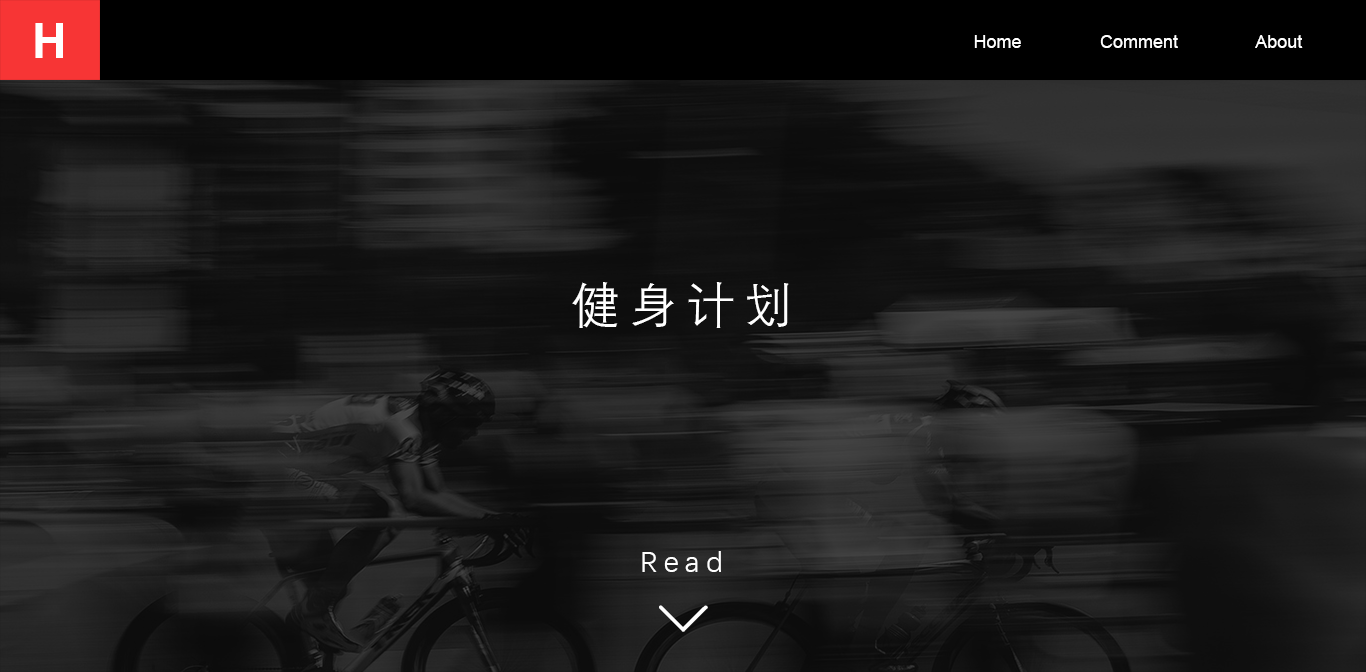
<style>
.page{position:relative;width:1366px;height:672px}
.page>*{position:absolute;margin:0}
.t1{font:48px "Arial-BoldMT";color:#ffffff}
.t2{font:18px "ArialMT";color:#ffffff}
.t3{font:48px "DengXian-Regular";letter-spacing:0.2em;color:#ffffff}
.t4{font:30px "DengXian-Regular";letter-spacing:0.2em;color:#ffffff}
</style>
<div class="page">
<p class="t1" style="left:35px;top:23px;width:28px;height:35px">H</p>
<p class="t2" style="left:974px;top:35px;width:47px;height:13px">Home</p>
<p class="t2" style="left:1100px;top:35px;width:78px;height:13px">Comment</p>
<p class="t2" style="left:1255px;top:35px;width:48px;height:13px">About</p>
<p class="t3" style="left:572px;top:282px;width:217px;height:46px">健身计划</p>
<p class="t4" style="left:642px;top:551px;width:79px;height:21px">Read</p>
</div>
